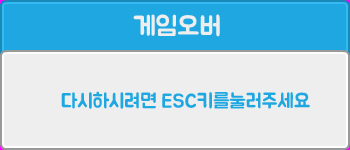
<style>
.page{position:relative;width:350px;height:150px;background:#eeeeee}
.page>*{position:absolute;margin:0}
.t1{font:26.7px "BMJUA";color:#eeeeee}
.t2{font:20px "BMJUA";color:#1ea7e1}
</style>
<div class="page">
<p class="t1" style="left:133px;top:14px;width:87px;height:23px">게임오버</p>
<p class="t2" style="left:61px;top:91px;width:249px;height:18px">다시하시려면 ESC키를눌러주세요</p>
</div>
